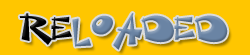
<style>
.page{position:relative;width:250px;height:55px;background:#ffc600}
.page>*{position:absolute;margin:0}
.t1{font:44px "Kill-Switch-Regular";color:#6a84a4}
.t2{font:44px "Kill-Switch-Regular";color:#000000}
</style>
<div class="page">
<p class="t1" style="left:19px;top:13px;width:209px;height:37px"><span class="t2">Re</span>loaded</p>
</div>
